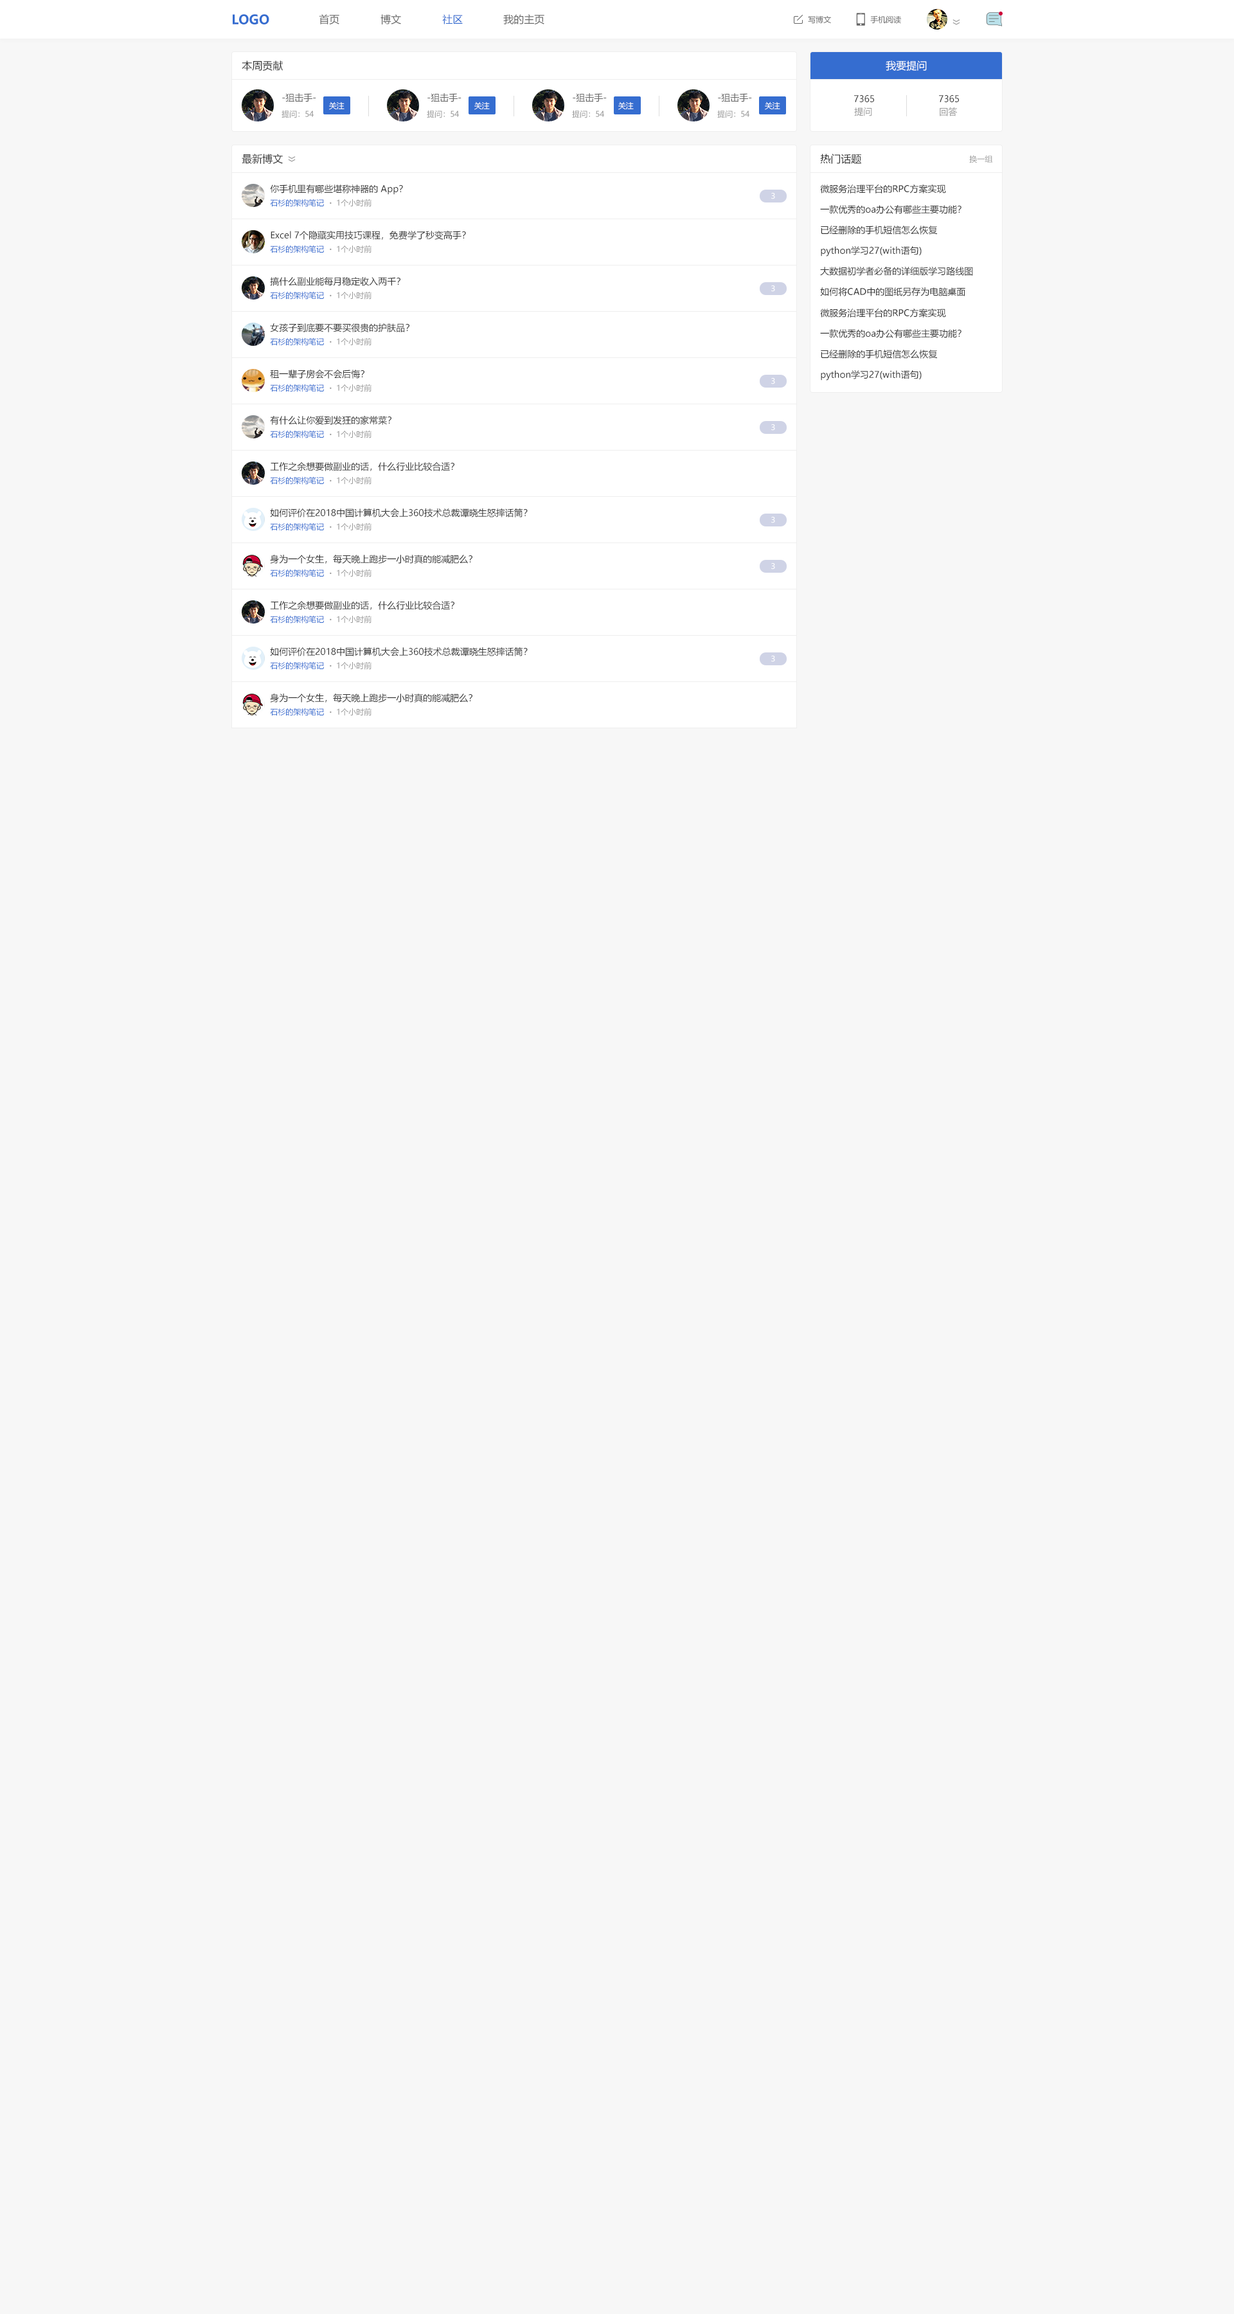
<style>
.page{position:relative;width:1234px;height:2314px;background:#f7f7f7}
.page>*{position:absolute;margin:0}
.t1{font:12.9px "MicrosoftYaHei-Bold";color:#356dd0}
.t2{font:10.3px "MicrosoftYaHei";color:#666666}
.t3{font:10.3px "MicrosoftYaHei";color:#356dd0}
.t4{font:7.7px "MicrosoftYaHei";color:#666666}
.t5{font:10.3px "MicrosoftYaHei";color:#333333}
.t6{font:10.3px "MicrosoftYaHei";color:#ffffff}
.t7{font:9px "MicrosoftYaHei";color:#666666}
.t8{font:7.7px "MicrosoftYaHei";color:#ffffff}
.t9{font:9px "MicrosoftYaHei";color:#333333}
.t10{font:7.7px "MicrosoftYaHei";color:#999999}
.t11{font:9px "MicrosoftYaHei";color:#999999}
.t12{font:7.7px "MicrosoftYaHei";color:#356dd0}
.t13{font:11.6px "MicrosoftYaHei";color:#999999}
</style>
<div class="page">
<p class="t1" style="left:233px;top:14px;width:36px;height:10px">LOGO</p>
<p class="t2" style="left:319px;top:14px;width:20px;height:10px">首页</p>
<p class="t2" style="left:381px;top:14px;width:20px;height:10px">博文</p>
<p class="t3" style="left:442px;top:14px;width:21px;height:10px">社区</p>
<p class="t2" style="left:503px;top:14px;width:41px;height:10px">我的主页</p>
<p class="t4" style="left:808px;top:15px;width:23px;height:9px">写博文</p>
<p class="t4" style="left:870px;top:15px;width:31px;height:9px">手机阅读</p>
<p class="t5" style="left:242px;top:60px;width:41px;height:11px">本周贡献</p>
<p class="t6" style="left:886px;top:60px;width:41px;height:11px">我要提问</p>
<p class="t7" style="left:282px;top:93px;width:34px;height:9px">-狙击手-</p>
<p class="t8" style="left:329px;top:102px;width:16px;height:8px">关注</p>
<p class="t7" style="left:428px;top:93px;width:34px;height:9px">-狙击手-</p>
<p class="t8" style="left:474px;top:102px;width:16px;height:8px">关注</p>
<p class="t7" style="left:573px;top:93px;width:34px;height:9px">-狙击手-</p>
<p class="t8" style="left:618px;top:102px;width:16px;height:8px">关注</p>
<p class="t7" style="left:718px;top:93px;width:34px;height:9px">-狙击手-</p>
<p class="t8" style="left:765px;top:102px;width:15px;height:8px">关注</p>
<p class="t9" style="left:854px;top:95px;width:20px;height:7px">7365</p>
<p class="t9" style="left:939px;top:95px;width:20px;height:7px">7365</p>
<p class="t10" style="left:282px;top:110px;width:32px;height:8px">提问：54</p>
<p class="t10" style="left:427px;top:110px;width:32px;height:8px">提问：54</p>
<p class="t10" style="left:572px;top:110px;width:32px;height:8px">提问：54</p>
<p class="t10" style="left:717px;top:110px;width:33px;height:8px">提问：54</p>
<p class="t11" style="left:854px;top:107px;width:18px;height:9px">提问</p>
<p class="t11" style="left:940px;top:107px;width:18px;height:9px">回答</p>
<p class="t5" style="left:242px;top:154px;width:41px;height:10px">最新博文</p>
<p class="t5" style="left:820px;top:154px;width:42px;height:10px">热门话题</p>
<p class="t10" style="left:969px;top:155px;width:24px;height:8px">换一组</p>
<p class="t9" style="left:270px;top:184px;width:133px;height:11px">你手机里有哪些堪称神器的 App？</p>
<p class="t9" style="left:820px;top:184px;width:126px;height:10px">微服务治理平台的RPC方案实现</p>
<p class="t8" style="left:771px;top:193px;width:4px;height:6px">3</p>
<p class="t12" style="left:270px;top:199px;width:54px;height:8px">石杉的架构笔记</p>
<p class="t13" style="left:330px;top:202px;width:2px;height:2px">.</p>
<p class="t10" style="left:337px;top:199px;width:35px;height:8px">1个小时前</p>
<p class="t9" style="left:820px;top:205px;width:142px;height:9px">一款优秀的oa办公有哪些主要功能？</p>
<p class="t9" style="left:271px;top:230px;width:195px;height:10px">Excel 7个隐藏实用技巧课程，免费学了秒变高手？</p>
<p class="t9" style="left:821px;top:226px;width:117px;height:9px">已经删除的手机短信怎么恢复</p>
<p class="t12" style="left:270px;top:245px;width:54px;height:8px">石杉的架构笔记</p>
<p class="t10" style="left:337px;top:245px;width:35px;height:8px">1个小时前</p>
<p class="t13" style="left:330px;top:248px;width:2px;height:2px">.</p>
<p class="t9" style="left:821px;top:246px;width:101px;height:10px">python学习27(with语句)</p>
<p class="t9" style="left:820px;top:266px;width:153px;height:10px">大数据初学者必备的详细版学习路线图</p>
<p class="t9" style="left:270px;top:277px;width:131px;height:9px">搞什么副业能每月稳定收入两千？</p>
<p class="t12" style="left:270px;top:291px;width:54px;height:9px">石杉的架构笔记</p>
<p class="t10" style="left:337px;top:291px;width:35px;height:9px">1个小时前</p>
<p class="t8" style="left:771px;top:285px;width:4px;height:7px">3</p>
<p class="t9" style="left:820px;top:287px;width:146px;height:9px">如何将CAD中的图纸另存为电脑桌面</p>
<p class="t13" style="left:330px;top:294px;width:2px;height:2px">.</p>
<p class="t9" style="left:820px;top:308px;width:126px;height:10px">微服务治理平台的RPC方案实现</p>
<p class="t9" style="left:270px;top:323px;width:140px;height:9px">女孩子到底要不要买很贵的护肤品？</p>
<p class="t9" style="left:820px;top:329px;width:142px;height:9px">一款优秀的oa办公有哪些主要功能？</p>
<p class="t12" style="left:270px;top:338px;width:54px;height:8px">石杉的架构笔记</p>
<p class="t13" style="left:330px;top:341px;width:2px;height:2px">.</p>
<p class="t10" style="left:337px;top:338px;width:35px;height:8px">1个小时前</p>
<p class="t9" style="left:821px;top:350px;width:117px;height:9px">已经删除的手机短信怎么恢复</p>
<p class="t9" style="left:270px;top:370px;width:94px;height:9px">租一辈子房会不会后悔？</p>
<p class="t9" style="left:821px;top:370px;width:101px;height:11px">python学习27(with语句)</p>
<p class="t12" style="left:270px;top:384px;width:54px;height:8px">石杉的架构笔记</p>
<p class="t13" style="left:330px;top:387px;width:2px;height:2px">.</p>
<p class="t10" style="left:337px;top:384px;width:35px;height:8px">1个小时前</p>
<p class="t8" style="left:771px;top:378px;width:4px;height:6px">3</p>
<p class="t9" style="left:270px;top:415px;width:122px;height:10px">有什么让你爱到发狂的家常菜？</p>
<p class="t8" style="left:771px;top:424px;width:4px;height:7px">3</p>
<p class="t12" style="left:270px;top:430px;width:54px;height:8px">石杉的架构笔记</p>
<p class="t13" style="left:330px;top:433px;width:2px;height:2px">.</p>
<p class="t10" style="left:337px;top:430px;width:35px;height:8px">1个小时前</p>
<p class="t9" style="left:270px;top:462px;width:185px;height:9px">工作之余想要做副业的话，什么行业比较合适？</p>
<p class="t12" style="left:270px;top:476px;width:54px;height:9px">石杉的架构笔记</p>
<p class="t13" style="left:330px;top:480px;width:2px;height:2px">.</p>
<p class="t10" style="left:337px;top:476px;width:35px;height:9px">1个小时前</p>
<p class="t9" style="left:270px;top:509px;width:258px;height:9px">如何评价在2018中国计算机大会上360技术总裁谭晓生怒摔话筒？</p>
<p class="t8" style="left:771px;top:517px;width:4px;height:6px">3</p>
<p class="t12" style="left:270px;top:523px;width:54px;height:8px">石杉的架构笔记</p>
<p class="t13" style="left:330px;top:526px;width:2px;height:2px">.</p>
<p class="t10" style="left:337px;top:523px;width:35px;height:8px">1个小时前</p>
<p class="t9" style="left:270px;top:555px;width:203px;height:9px">身为一个女生，每天晚上跑步一小时真的能减肥么？</p>
<p class="t12" style="left:270px;top:569px;width:54px;height:8px">石杉的架构笔记</p>
<p class="t10" style="left:337px;top:569px;width:35px;height:8px">1个小时前</p>
<p class="t8" style="left:771px;top:563px;width:4px;height:7px">3</p>
<p class="t13" style="left:330px;top:572px;width:2px;height:2px">.</p>
<p class="t9" style="left:270px;top:601px;width:185px;height:9px">工作之余想要做副业的话，什么行业比较合适？</p>
<p class="t12" style="left:270px;top:615px;width:54px;height:9px">石杉的架构笔记</p>
<p class="t10" style="left:337px;top:615px;width:35px;height:9px">1个小时前</p>
<p class="t13" style="left:330px;top:618px;width:2px;height:2px">.</p>
<p class="t9" style="left:270px;top:647px;width:258px;height:9px">如何评价在2018中国计算机大会上360技术总裁谭晓生怒摔话筒？</p>
<p class="t12" style="left:270px;top:662px;width:54px;height:8px">石杉的架构笔记</p>
<p class="t13" style="left:330px;top:665px;width:2px;height:2px">.</p>
<p class="t10" style="left:337px;top:662px;width:35px;height:8px">1个小时前</p>
<p class="t8" style="left:771px;top:656px;width:4px;height:6px">3</p>
<p class="t9" style="left:270px;top:694px;width:203px;height:9px">身为一个女生，每天晚上跑步一小时真的能减肥么？</p>
<p class="t12" style="left:270px;top:708px;width:54px;height:8px">石杉的架构笔记</p>
<p class="t13" style="left:330px;top:711px;width:2px;height:2px">.</p>
<p class="t10" style="left:337px;top:708px;width:35px;height:8px">1个小时前</p>
</div>
